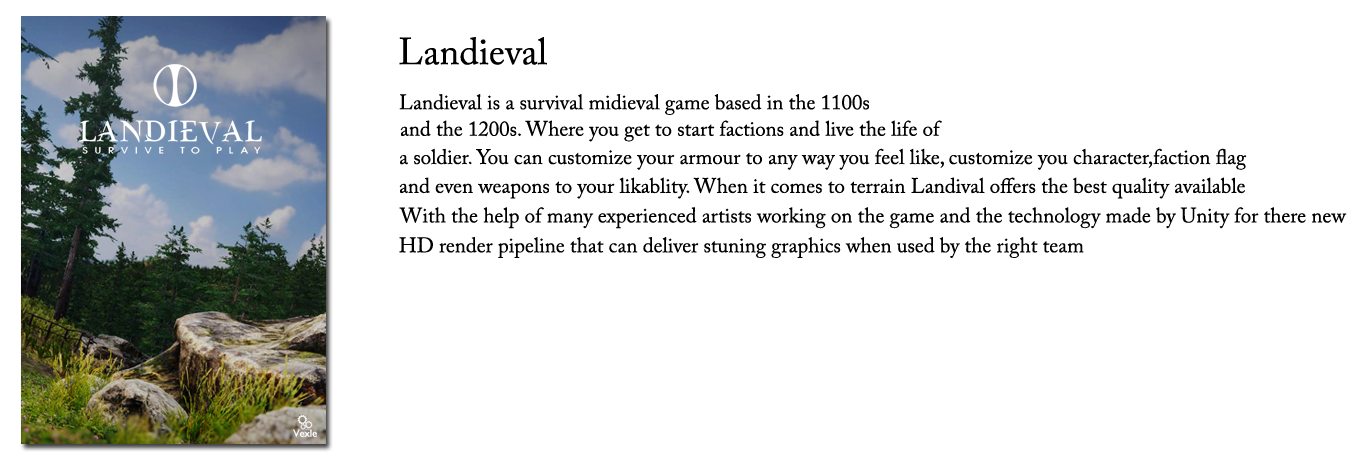
<style>
.page{position:relative;width:1363px;height:459px;background:#ffffff}
.page>*{position:absolute;margin:0}
.t1{font:37.5px "ACaslonPro-Regular";color:#000000}
.t2{font:20.8px "ACaslonPro-Regular";color:#000000}
</style>
<div class="page">
<p class="t1" style="left:399px;top:37px;width:148px;height:28px">Landieval</p>
<p class="t2" style="left:399px;top:94px;width:470px;height:21px">Landieval is a survival midieval game based in the 1100s</p>
<p class="t2" style="left:400px;top:120px;width:542px;height:22px">and the 1200s. Where you get to start factions and live the life of</p>
<p class="t2" style="left:400px;top:148px;width:847px;height:22px">a soldier. You can customize your armour to any way you feel like, customize you character,faction flag</p>
<p class="t2" style="left:399px;top:177px;width:846px;height:22px">and even weapons to your likablity. When it comes to terrain Landival offers the best quality available</p>
<p class="t2" style="left:399px;top:207px;width:948px;height:22px">With the help of many experienced artists working on the game and the technology made by Unity for there new</p>
<p class="t2" style="left:399px;top:237px;width:685px;height:21px">HD render pipeline that can deliver stuning graphics when used by the right team</p>
</div>
